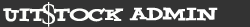
<style>
.page{position:relative;width:250px;height:27px;background:#333333}
.page>*{position:absolute;margin:0}
.t1{font:30px "VnTimes";color:#fcfdfa}
.t2{font:20px "VNI-Yahoo";color:#fdfefb}
.t3{font:20px "VNI-Yahoo";color:#ffffff}
</style>
<div class="page">
<p class="t1" style="left:42px;top:2px;width:13px;height:25px">$</p>
<p class="t2" style="left:3px;top:8px;width:121px;height:14px">UIT   TOCK</p>
<p class="t3" style="left:129px;top:7px;width:89px;height:14px">admin</p>
</div>
